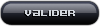
<style>
.page{position:relative;width:100px;height:26px}
.page>*{position:absolute;margin:0}
.t1{font:15px "AcknowledgeTT-BRK-";color:#ebebeb}
</style>
<div class="page">
<p class="t1" style="left:25px;top:10px;width:50px;height:6px">valider</p>
</div>
